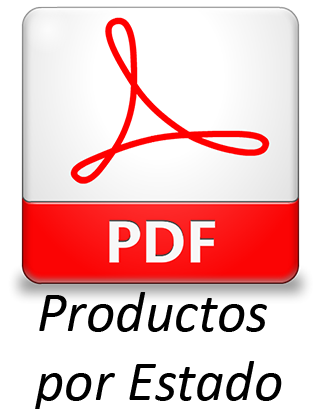
<style>
.page{position:relative;width:321px;height:409px;background:#ffffff}
.page>*{position:absolute;margin:0}
.t1{font:57.3px "Calibri-Italic";color:#000000}
.t2{font:53.4px "Calibri-Italic";color:#000000}
</style>
<div class="page">
<p class="t1" style="left:34px;top:226px;width:248px;height:185px;text-align:center"><span class="t2">Reporte de<br></span>Productos <br>por Estado</p>
</div>
